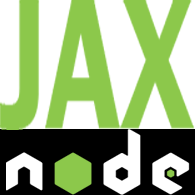
<style>
.page{position:relative;width:195px;height:195px;background:#ffffff}
.page>*{position:absolute;margin:0}
.t1{font:191.8px "FranklinGothic-Demi";color:#8cc84b;scale:0.65 1}
</style>
<div class="page">
<p class="t1" style="left:0px;top:0px;width:195px;height:130px">JAX</p>
</div>
